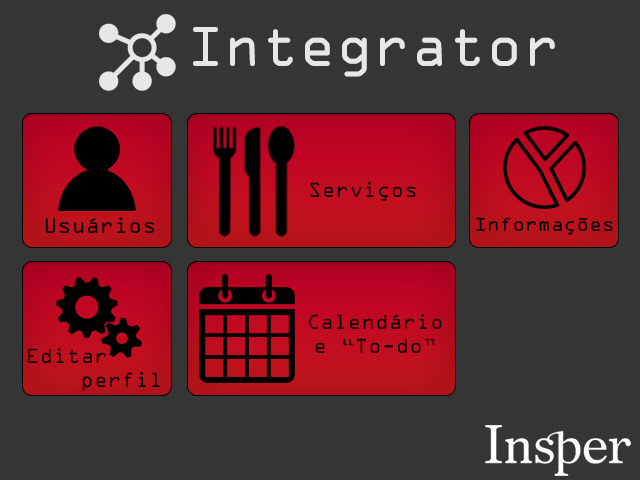
<style>
.page{position:relative;width:640px;height:480px;background:#373737}
.page>*{position:absolute;margin:0}
.t1{font:60px "OCRAExtended";letter-spacing:0.02em;color:#e8e1e1}
.t2{font:22px "OCRAExtended";letter-spacing:0.02em;color:#000000}
.t3{font:22.7px "OCRAExtended";letter-spacing:0.02em;color:#000000}
.t4{font:20.4px "OCRAExtended";letter-spacing:0.02em;color:#000000}
.t5{font:22px/24px "OCRAExtended";letter-spacing:0.02em;color:#000000}
</style>
<div class="page">
<p class="t1" style="left:193px;top:27px;width:362px;height:50px">Integrator</p>
<p class="t2" style="left:310px;top:182px;width:106px;height:19px">Serviços</p>
<p class="t3" style="left:45px;top:217px;width:109px;height:16px">Usuários</p>
<p class="t4" style="left:476px;top:217px;width:137px;height:18px">Informações</p>
<p class="t5" style="left:308px;top:314px;width:134px;height:39px;text-align:center">Calendário<br>e “To-do”</p>
<p class="t5" style="left:28px;top:348px;width:132px;height:43px;text-align:right">Editar <br>perfil</p>
</div>
